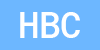
<style>
.page{position:relative;width:100px;height:50px;background:#6db7ff}
.page>*{position:absolute;margin:0}
.t1{font:35.6px "RobotoMono-Medium";color:#ffffff}
</style>
<div class="page">
<p class="t1" style="left:20px;top:12px;width:60px;height:26px">HBC</p>
</div>
